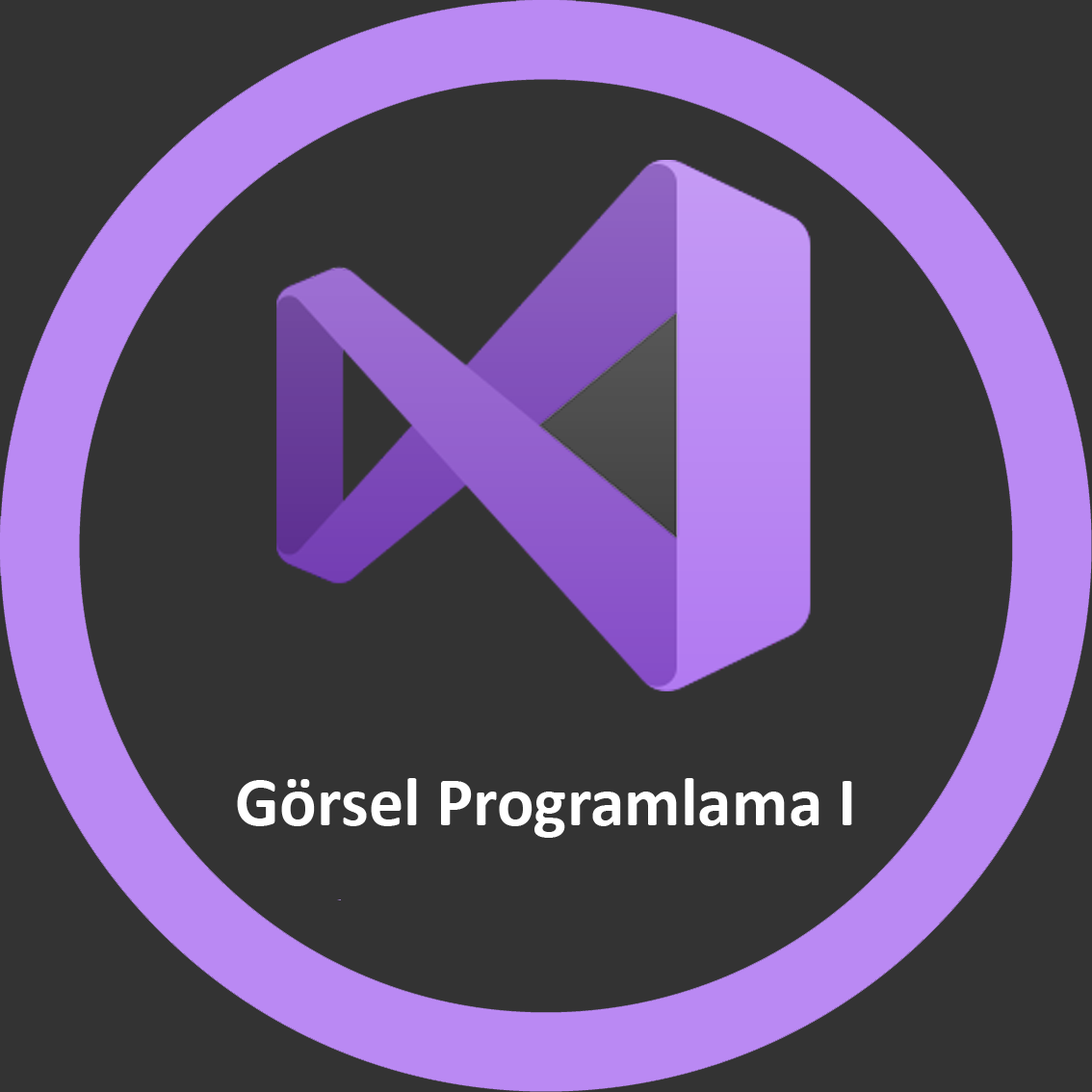
<style>
.page{position:relative;width:1092px;height:1092px;background:#333333}
.page>*{position:absolute;margin:0}
.t1{font:69.3px "Calibri-Bold";color:#ffffff}
</style>
<div class="page">
<p class="t1" style="left:237px;top:778px;width:615px;height:60px">Görsel Programlama I</p>
</div>
